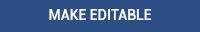
<style>
.page{position:relative;width:200px;height:32px;background:#2c4e85}
.page>*{position:absolute;margin:0}
.t1{font:14px "Roboto-Medium";color:#ffffff}
</style>
<div class="page">
<p class="t1" style="left:49px;top:9px;width:103px;height:11px">MAKE EDITABLE</p>
</div>
